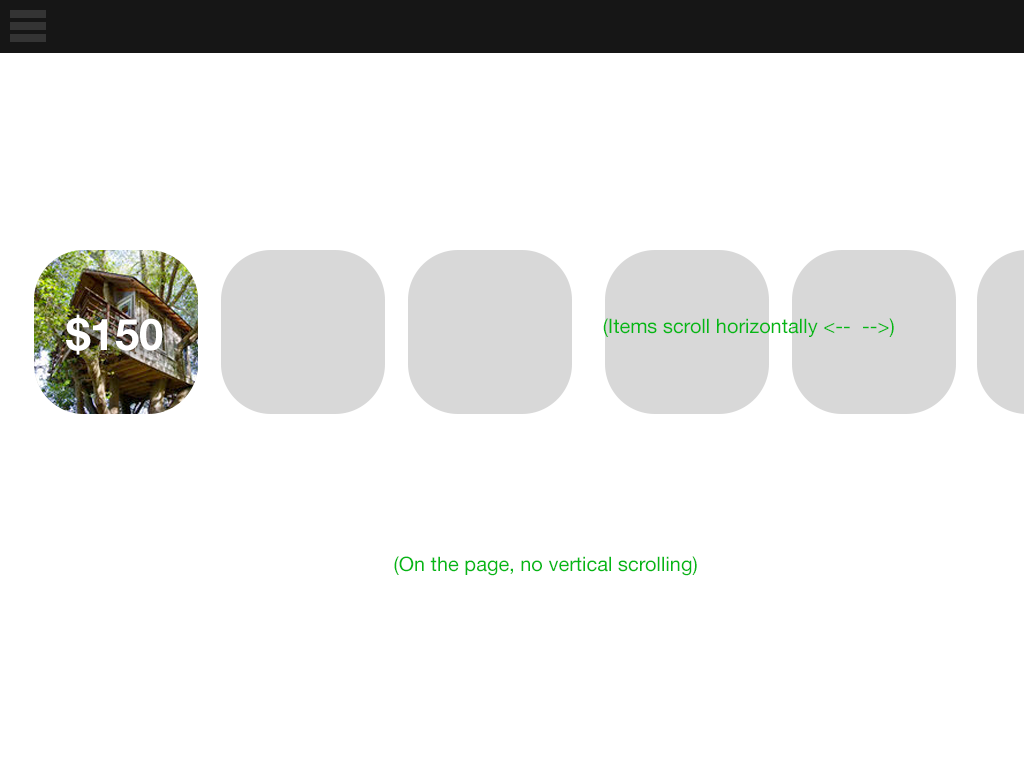
<style>
.page{position:relative;width:1024px;height:768px;background:#ffffff}
.page>*{position:absolute;margin:0}
.t1{font:43.7px "HelveticaNeue-Bold";color:#ffffff}
.t2{font:20px "HelveticaNeue";color:#04b715}
</style>
<div class="page">
<p class="t1" style="left:66px;top:314px;width:97px;height:41px">$150</p>
<p class="t2" style="left:603px;top:318px;width:291px;height:19px">(Items scroll horizontally &lt;--  --&gt;)</p>
<p class="t2" style="left:394px;top:556px;width:303px;height:20px">(On the page, no vertical scrolling)</p>
</div>
